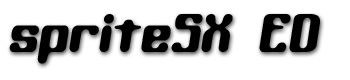
<style>
.page{position:relative;width:350px;height:80px;background:#ffffff}
.page>*{position:absolute;margin:0}
.t1{font:55px "KaliberRound(BRK)";color:#000000}
</style>
<div class="page">
<p class="t1" style="left:9px;top:14px;width:311px;height:50px">spriteSX ED</p>
</div>
